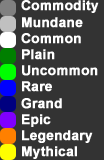
<style>
.page{position:relative;width:104px;height:160px;background:#333333}
.page>*{position:absolute;margin:0}
.t1{font:13.5px "Arial-BoldMT";color:#ffffff;font-weight:bold}
</style>
<div class="page">
<p class="t1" style="left:21px;top:0px;width:78px;height:159px">Commodity<br>Mundane<br>Common<br>Plain<br>Uncommon<br>Rare<br>Grand<br>Epic<br>Legendary<br>Mythical</p>
</div>
